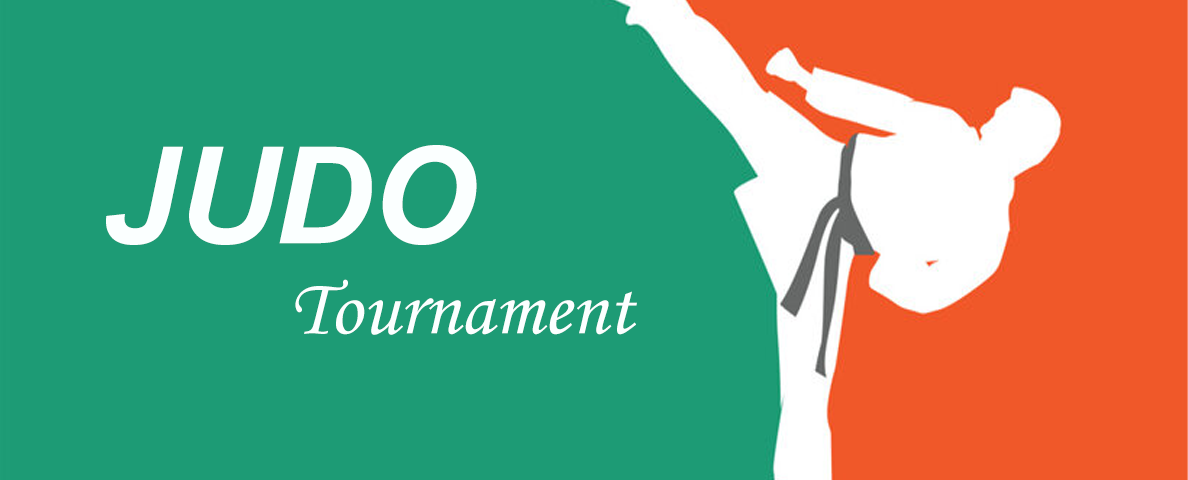
<style>
.page{position:relative;width:1188px;height:480px;background:#1d9b75}
.page>*{position:absolute;margin:0}
.t1{font:134.4px "Arial-BoldItalicMT";color:#fbffff}
.t2{font:80.4px "MonotypeCorsiva";color:#fbffff}
</style>
<div class="page">
<p class="t1" style="left:106px;top:145px;width:371px;height:100px">JUDO</p>
<p class="t2" style="left:295px;top:279px;width:342px;height:56px">Tournament</p>
</div>
